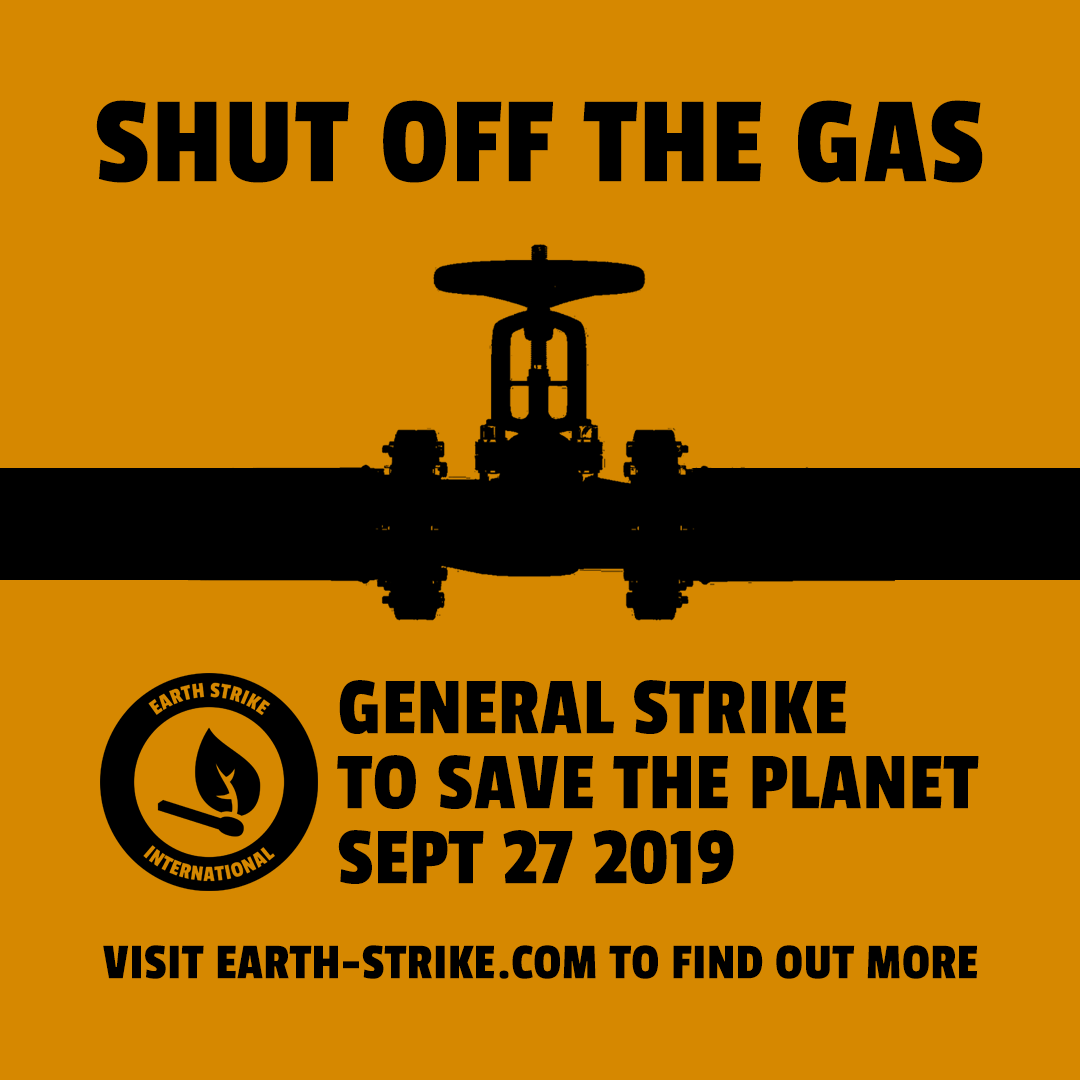
<style>
.page{position:relative;width:1080px;height:1080px;background:#d68800}
.page>*{position:absolute;margin:0}
.t1{font:127.4px "PassionOne-Regular";letter-spacing:0.02em;color:#000000;text-transform:uppercase}
.t2{font:84.2px/75.1px "PassionOne-Regular";letter-spacing:0.01em;color:#000000}
.t3{font:52.2px "PassionOne-Regular";letter-spacing:0.01em;color:#000000}
</style>
<div class="page">
<p class="t1" style="left:96px;top:100px;width:887px;height:83px">shut off the gas</p>
<p class="t2" style="left:337px;top:680px;width:642px;height:204px">GENERAL STRIKE<br>TO SAVE THE PLANET<br>SEPT 27 2019</p>
<p class="t3" style="left:103px;top:945px;width:875px;height:34px">VISIT EARTH-STRIKE.COM TO FIND OUT MORE</p>
</div>
